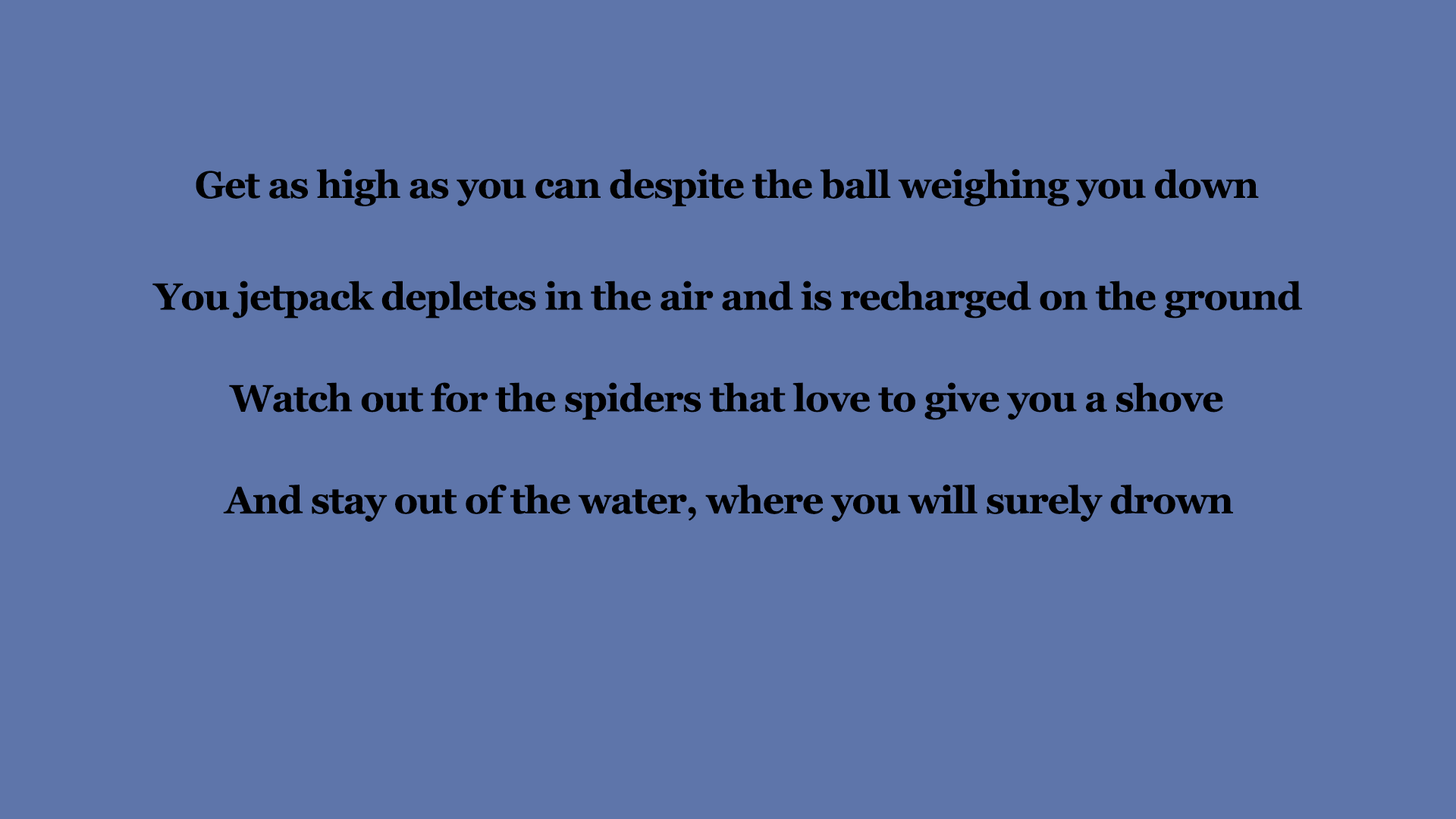
<style>
.page{position:relative;width:1456px;height:819px;background:#5e75aa}
.page>*{position:absolute;margin:0}
.t1{font:37.9px "Georgia-Bold";letter-spacing:-0.025em;color:#010101}
.t2{font:37.9px "Georgia-Bold";letter-spacing:-0.025em;color:#000000}
</style>
<div class="page">
<p class="t1" style="left:196px;top:169px;width:1063px;height:37px">Get as high as you can despite the ball weighing you down</p>
<p class="t2" style="left:152px;top:281px;width:1150px;height:37px">You jetpack depletes in the air and is recharged on the ground</p>
<p class="t2" style="left:229px;top:382px;width:994px;height:38px">Watch out for the spiders that love to give you a shove</p>
<p class="t2" style="left:223px;top:485px;width:1010px;height:37px">And stay out of the water, where you will surely drown</p>
</div>
